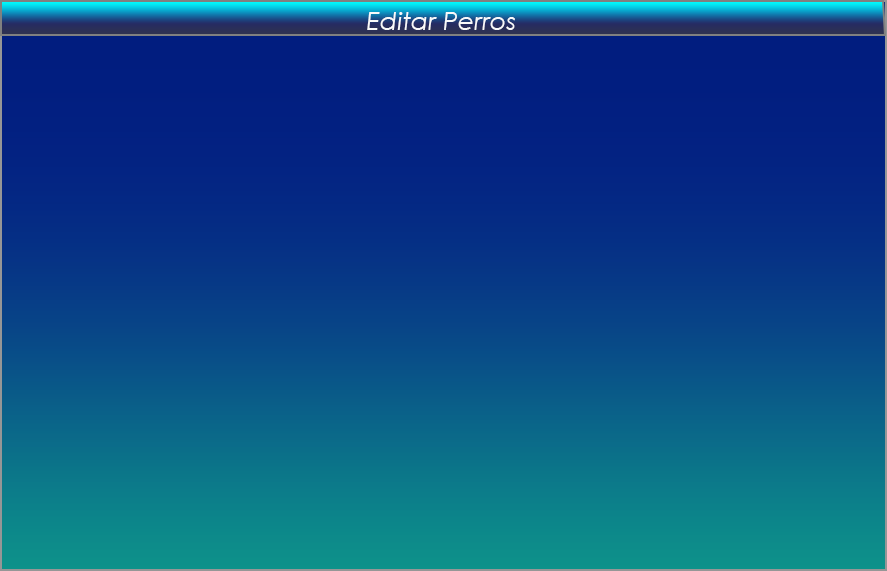
<style>
.page{position:relative;width:887px;height:571px}
.page>*{position:absolute;margin:0}
.t1{font:25.4px "CenturyGothic-Italic";color:#f9f9fa}
</style>
<div class="page">
<p class="t1" style="left:367px;top:12px;width:148px;height:18px">Editar Perros</p>
</div>
